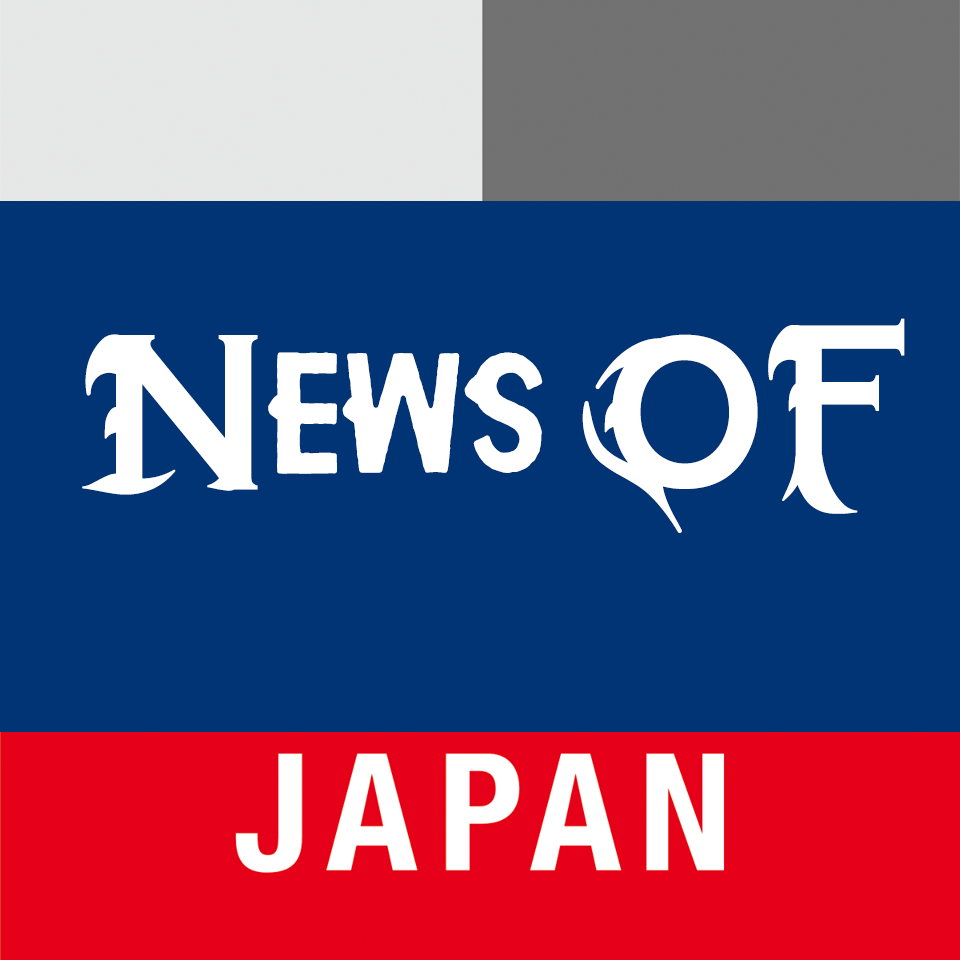
<style>
.page{position:relative;width:960px;height:960px;background:#003474}
.page>*{position:absolute;margin:0}
.t1{font:150.5px "HipotesisFreePersonalUse";letter-spacing:0.025em;color:#ffffff;scale:0.85 1}
</style>
<div class="page">
<p class="t1" style="left:82px;top:318px;width:823px;height:215px">News OF</p>
</div>
